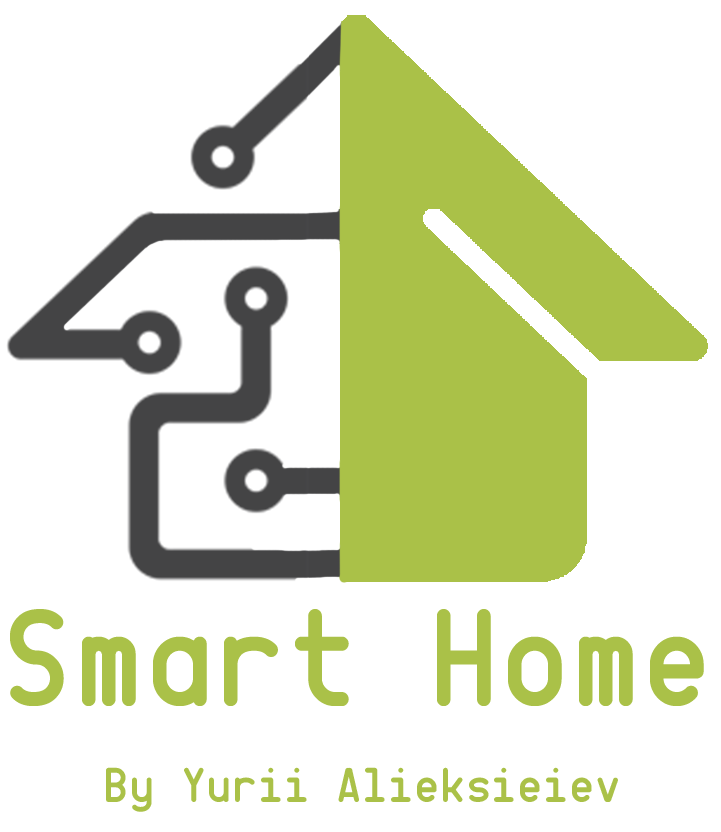
<style>
.page{position:relative;width:721px;height:832px;background:#ffffff}
.page>*{position:absolute;margin:0}
.t1{font:141.7px "CQMonoRUSbyDaymarius";letter-spacing:0.03em;color:#aac148;scale:0.97 1}
.t2{font:50px "CQMonoRUSbyDaymarius";letter-spacing:0.03em;color:#aac148}
</style>
<div class="page">
<p class="t1" style="left:10px;top:609px;width:694px;height:97px">Smart Home</p>
<p class="t2" style="left:106px;top:767px;width:512px;height:45px">By Yurii Alieksieiev</p>
</div>
